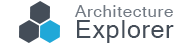
<style>
.page{position:relative;width:188px;height:43px;background:#ffffff}
.page>*{position:absolute;margin:0}
.t1{font:16.7px/20.8px "MicrosoftSansSerif";letter-spacing:0.05em;color:#727a84}
.t2{font:25px/20.8px "MicrosoftSansSerif";letter-spacing:0.03em;color:#444d58}
</style>
<div class="page">
<p class="t1" style="left:74px;top:5px;width:100px;height:38px">Architecture <br><span class="t2">Explorer</span></p>
</div>
